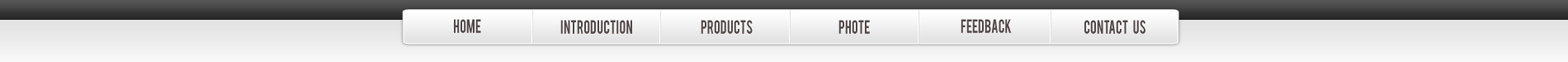
<style>
.page{position:relative;width:1568px;height:62px}
.page>*{position:absolute;margin:0}
.t1{font:14.9px "Bebas";color:#544b4b;scale:0.82 1}
</style>
<div class="page">
<p class="t1" style="left:454px;top:19px;width:27px;height:14px">home</p>
<p class="t1" style="left:560px;top:20px;width:72px;height:14px">Introduction</p>
<p class="t1" style="left:701px;top:20px;width:52px;height:14px">products</p>
<p class="t1" style="left:838px;top:20px;width:32px;height:14px">phote</p>
<p class="t1" style="left:961px;top:19px;width:51px;height:14px">feedback</p>
<p class="t1" style="left:1084px;top:20px;width:61px;height:14px">contact    us</p>
</div>
